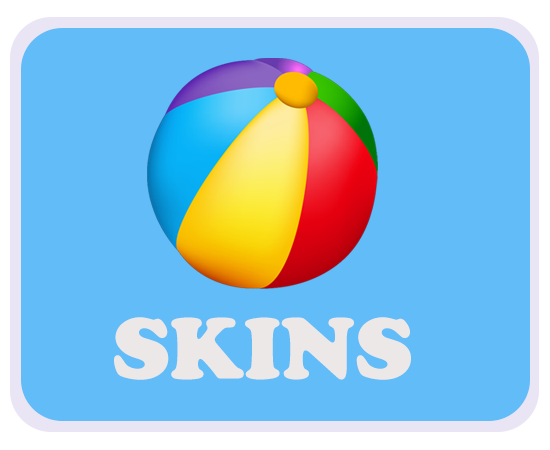
<style>
.page{position:relative;width:550px;height:450px;background:#62bcf8}
.page>*{position:absolute;margin:0}
.t1{font:90px "CooperBlack";color:#ece8e8}
</style>
<div class="page">
<p class="t1" style="left:114px;top:317px;width:297px;height:63px">SKINS</p>
</div>
